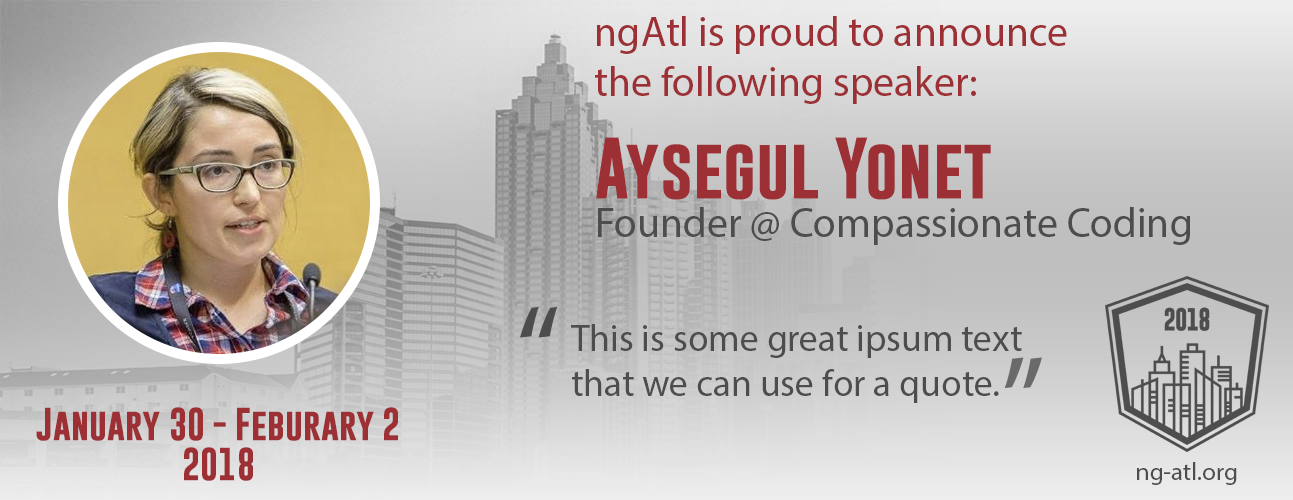
<style>
.page{position:relative;width:1293px;height:500px}
.page>*{position:absolute;margin:0}
.t1{font:41.7px "MyriadPro-Regular";color:#9d3035}
.t2{font:62.5px "GoboldBold";color:#9d3035}
.t3{font:41.7px "MyriadPro-Regular";color:#4d4d4e}
.t4{font:125px "MyriadPro-Regular";color:#4d4d4e}
.t5{font:37.5px "MyriadPro-Regular";color:#4d4d4e}
.t6{font:125px "MyriadPro-Regular";color:#6a6a6b}
.t7{font:33.3px "GoboldBold";color:#9d3035}
.t8{font:25px "MyriadPro-Regular";color:#4d4d4e}
</style>
<div class="page">
<p class="t1" style="left:595px;top:16px;width:472px;height:88px">ngAtl is proud to announce the following speaker:</p>
<p class="t2" style="left:596px;top:137px;width:395px;height:63px">Aysegul Yonet</p>
<p class="t3" style="left:598px;top:207px;width:593px;height:38px">Founder @ Compassionate Coding</p>
<p class="t4" style="left:520px;top:306px;width:38px;height:32px">“</p>
<p class="t5" style="left:571px;top:324px;width:451px;height:79px">This is some great ipsum text that we can use for a quote.</p>
<p class="t6" style="left:1004px;top:357px;width:38px;height:32px;rotate:180deg">“</p>
<p class="t7" style="left:36px;top:407px;width:362px;height:74px;text-align:center">January 30 - Feburary 2 <br>2018</p>
<p class="t8" style="left:1137px;top:462px;width:100px;height:23px">ng-atl.org</p>
</div>
